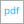
<style>
.page{position:relative;width:24px;height:24px;background:#ffffff}
.page>*{position:absolute;margin:0}
.t1{font:9.5px "DejaVuSans"}
</style>
<div class="page">
<p class="t1" style="left:4px;top:6px;width:16px;height:10px">pdf</p>
</div>
